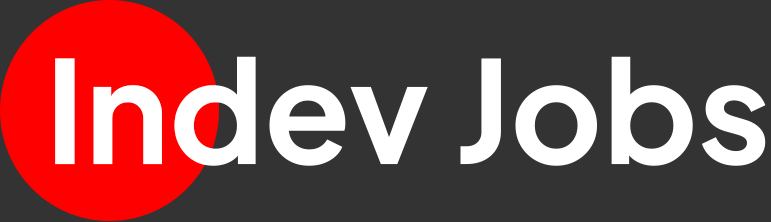
<style>
.page{position:relative;width:771px;height:222px;background:#333333}
.page>*{position:absolute;margin:0}
.t1{font:141.7px "PlusJakartaSans-Bold";color:#ffffff}
</style>
<div class="page">
<p class="t1" style="left:55px;top:56px;width:711px;height:110px">Indev Jobs</p>
</div>
